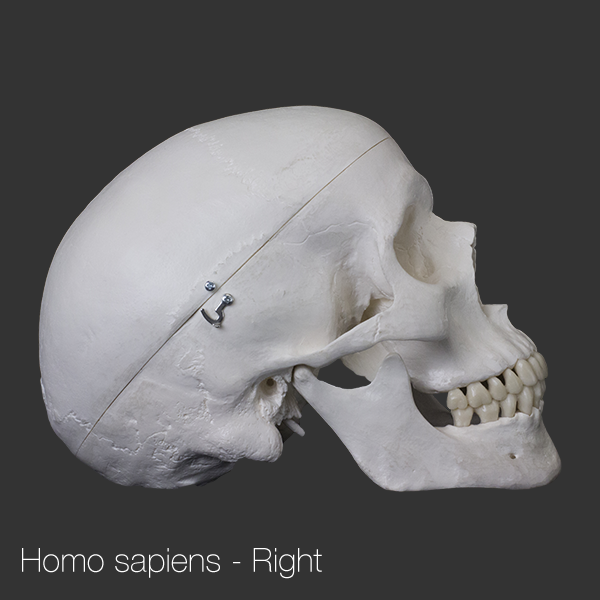
<style>
.page{position:relative;width:600px;height:600px;background:#333333}
.page>*{position:absolute;margin:0}
.t1{font:33.3px "HelveticaNeue-Thin";color:#ffffff}
</style>
<div class="page">
<p class="t1" style="left:22px;top:548px;width:300px;height:31px">Homo sapiens - Right</p>
</div>
